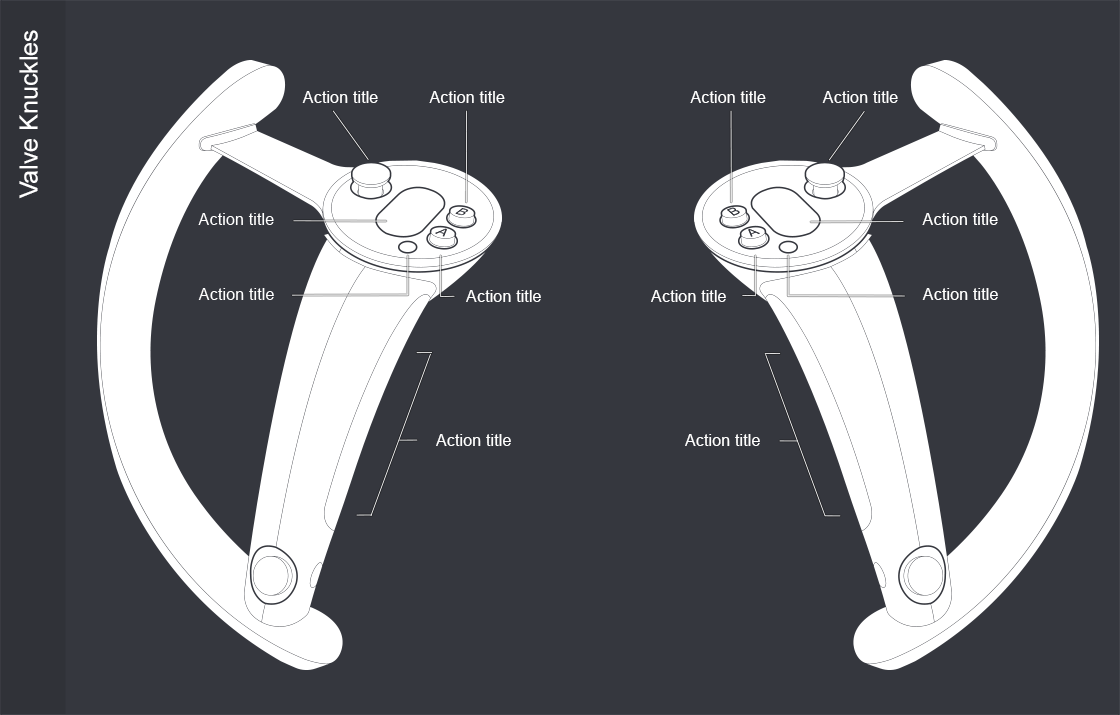
<style>
.page{position:relative;width:1120px;height:715px;background:#35373e}
.page>*{position:absolute;margin:0}
.t1{font:25px "ArialMT";color:#ffffff}
.t2{font:16.4px "ArialMT";color:#ffffff}
</style>
<div class="page">
<p class="t1" style="left:19px;top:30px;width:19px;height:169px;rotate:-90deg">Valve Knuckles</p>
<p class="t2" style="left:302px;top:91px;width:76px;height:12px">Action title</p>
<p class="t2" style="left:429px;top:91px;width:76px;height:12px">Action title</p>
<p class="t2" style="left:690px;top:91px;width:76px;height:12px">Action title</p>
<p class="t2" style="left:822px;top:91px;width:76px;height:12px">Action title</p>
<p class="t2" style="left:198px;top:213px;width:76px;height:12px">Action title</p>
<p class="t2" style="left:922px;top:213px;width:76px;height:12px">Action title</p>
<p class="t2" style="left:198px;top:288px;width:76px;height:12px">Action title</p>
<p class="t2" style="left:466px;top:290px;width:75px;height:12px">Action title</p>
<p class="t2" style="left:651px;top:290px;width:75px;height:12px">Action title</p>
<p class="t2" style="left:922px;top:288px;width:76px;height:12px">Action title</p>
<p class="t2" style="left:436px;top:434px;width:75px;height:12px">Action title</p>
<p class="t2" style="left:685px;top:434px;width:75px;height:12px">Action title</p>
</div>
